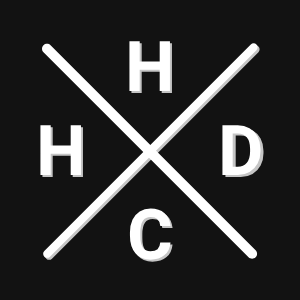
<style>
.page{position:relative;width:300px;height:300px;background:#121212}
.page>*{position:absolute;margin:0}
.t1{font:70px "Roboto-Bold";color:#ffffff}
</style>
<div class="page">
<p class="t1" style="left:129px;top:41px;width:41px;height:50px">H</p>
<p class="t1" style="left:131px;top:43px;width:41px;height:50px">H</p>
<p class="t1" style="left:40px;top:125px;width:41px;height:50px">H</p>
<p class="t1" style="left:222px;top:125px;width:39px;height:50px">D</p>
<p class="t1" style="left:42px;top:127px;width:41px;height:50px">H</p>
<p class="t1" style="left:225px;top:127px;width:39px;height:50px">D</p>
<p class="t1" style="left:129px;top:208px;width:42px;height:52px">C</p>
<p class="t1" style="left:131px;top:210px;width:42px;height:52px">C</p>
</div>
